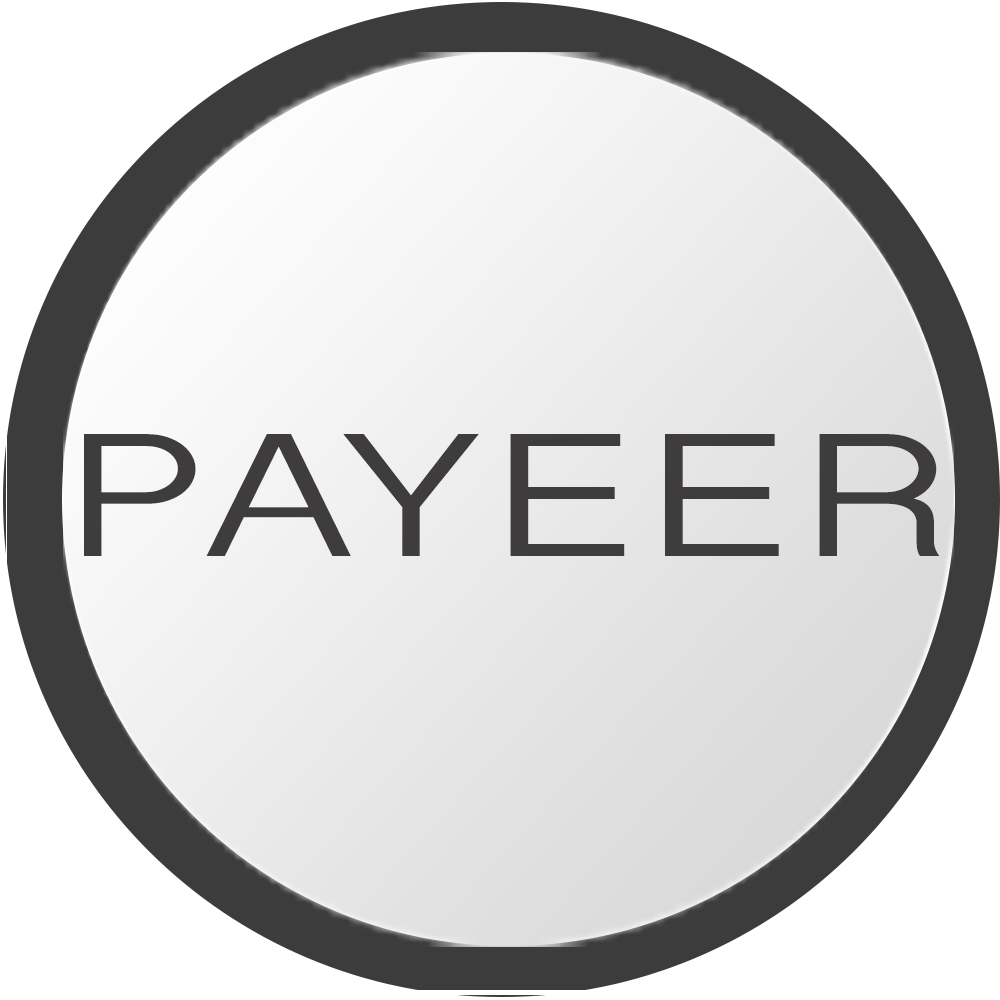
<style>
.page{position:relative;width:1000px;height:1000px;background:#ffffff}
.page>*{position:absolute;margin:0}
.t1{font:178.5px "MalayalamSangamMN";color:#3e3c3c;scale:1.35 1}
</style>
<div class="page">
<p class="t1" style="left:84px;top:434px;width:856px;height:122px">PAYEER</p>
</div>
